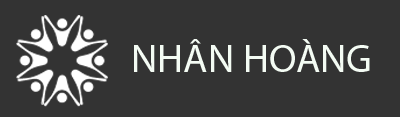
<style>
.page{position:relative;width:400px;height:117px;background:#333333}
.page>*{position:absolute;margin:0}
.t1{font:40px "MyriadPro-Regular";color:#f4fcf4}
</style>
<div class="page">
<p class="t1" style="left:134px;top:39px;width:236px;height:33px">NHÂN HOÀNG</p>
</div>
